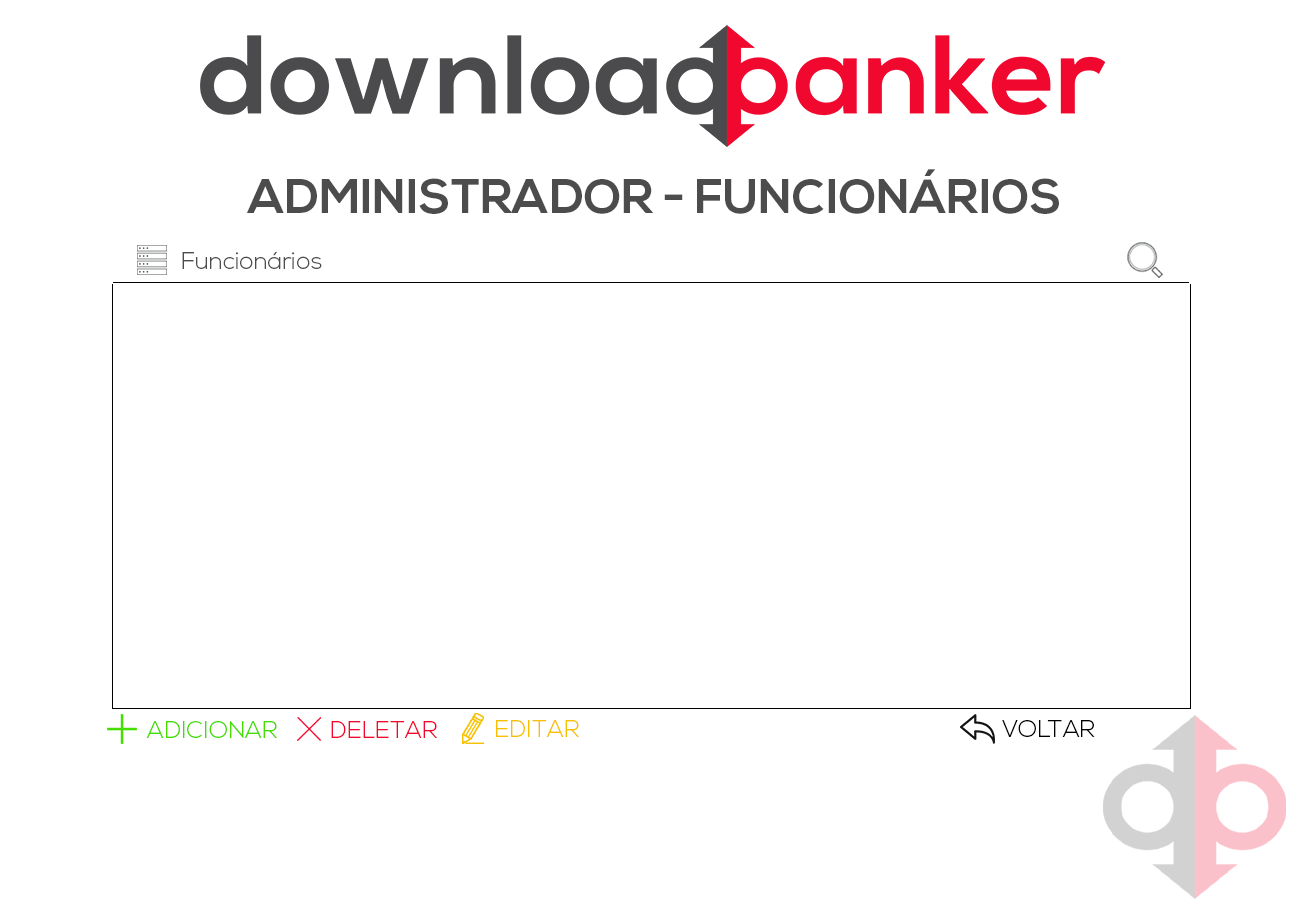
<style>
.page{position:relative;width:1305px;height:905px;background:#ffffff}
.page>*{position:absolute;margin:0}
.t1{font:48px "NexaBold";color:#4c4c4c}
.t2{font:24px "NexaLight";color:#4c4c4c}
.t3{font:24px "NexaLight";color:#44dd00}
.t4{font:24px "NexaLight";color:#f0082e}
.t5{font:24px "NexaLight";color:#f8c100}
.t6{font:24px "NexaLight";color:#000000}
</style>
<div class="page">
<p class="t1" style="left:247px;top:169px;width:812px;height:45px">ADMINISTRADOR - FUNCIONÁRIOS</p>
<p class="t2" style="left:182px;top:252px;width:140px;height:17px">Funcionários</p>
<p class="t3" style="left:146px;top:721px;width:131px;height:17px">ADICIONAR</p>
<p class="t4" style="left:331px;top:721px;width:106px;height:17px">DELETAR</p>
<p class="t5" style="left:496px;top:720px;width:83px;height:17px">EDITAR</p>
<p class="t6" style="left:1002px;top:720px;width:93px;height:17px">VOLTAR</p>
</div>
